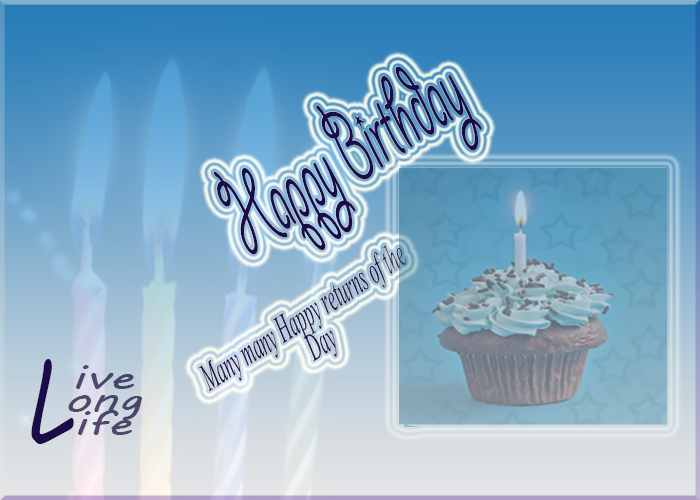
<style>
.page{position:relative;width:700px;height:500px}
.page>*{position:absolute;margin:0}
.t1{font:48px/31.6px "Vijaya";color:#1c0b49;scale:0.46 1}
.t2{font:118.3px/31.6px "GiddyupStd";color:#1c0b49;scale:0.46 1}
.t3{font:119.5px "MVBoli";color:#1c0b49;scale:0.68 1}
.t4{font:34.6px/23px "MVBoli";color:#4c476b;scale:1.44 1}
</style>
<div class="page">
<p class="t1" style="left:199px;top:66px;width:283px;height:326px;text-align:center;rotate:-33deg"><span class="t2">       <br><br><br><br>       Happy Birthday<br><br></span><br>Many many Happy returns of the <br>Day</p>
<p class="t3" style="left:31px;top:359px;width:43px;height:85px">L</p>
<p class="t4" style="left:68px;top:365px;width:75px;height:70px;text-align:center">ive<br>ong<br>ife</p>
</div>
